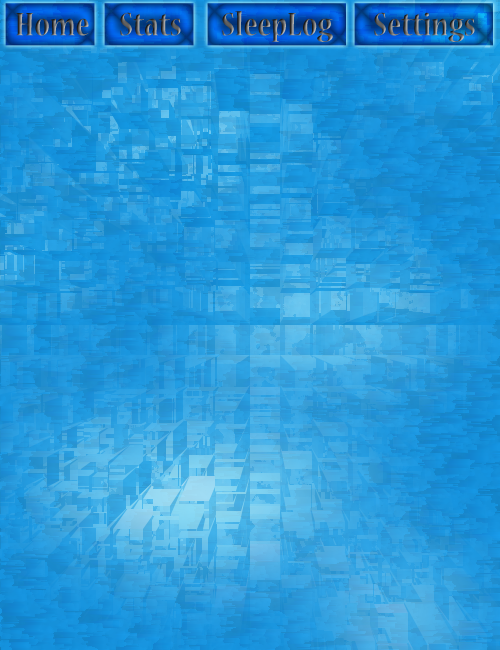
<style>
.page{position:relative;width:500px;height:650px}
.page>*{position:absolute;margin:0}
.t1{font:36px "NuevaStd-BoldCond"}
</style>
<div class="page">
<p class="t1" style="left:16px;top:13px;width:73px;height:23px">Home</p>
<p class="t1" style="left:120px;top:12px;width:61px;height:24px">Stats</p>
<p class="t1" style="left:222px;top:11px;width:111px;height:31px">SleepLog</p>
<p class="t1" style="left:374px;top:12px;width:101px;height:30px">Settings</p>
</div>
